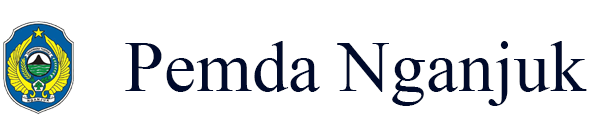
<style>
.page{position:relative;width:593px;height:135px;background:#ffffff}
.page>*{position:absolute;margin:0}
.t1{font:72px "TimesNewRomanPSMT";color:#000a2b}
</style>
<div class="page">
<p class="t1" style="left:125px;top:41px;width:462px;height:65px">Pemda Nganjuk</p>
</div>
